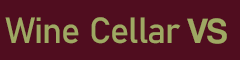
<style>
.page{position:relative;width:240px;height:60px;background:#500d1f}
.page>*{position:absolute;margin:0}
.t1{font:36px "Bahnschrift";letter-spacing:-0.025em;color:#9fa863}
.t2{font:36px "CoolveticaRg-Regular";letter-spacing:0.01em;color:#9fa863}
</style>
<div class="page">
<p class="t1" style="left:5px;top:17px;width:176px;height:27px">Wine Cellar</p>
<p class="t2" style="left:187px;top:18px;width:40px;height:26px">VS</p>
</div>
